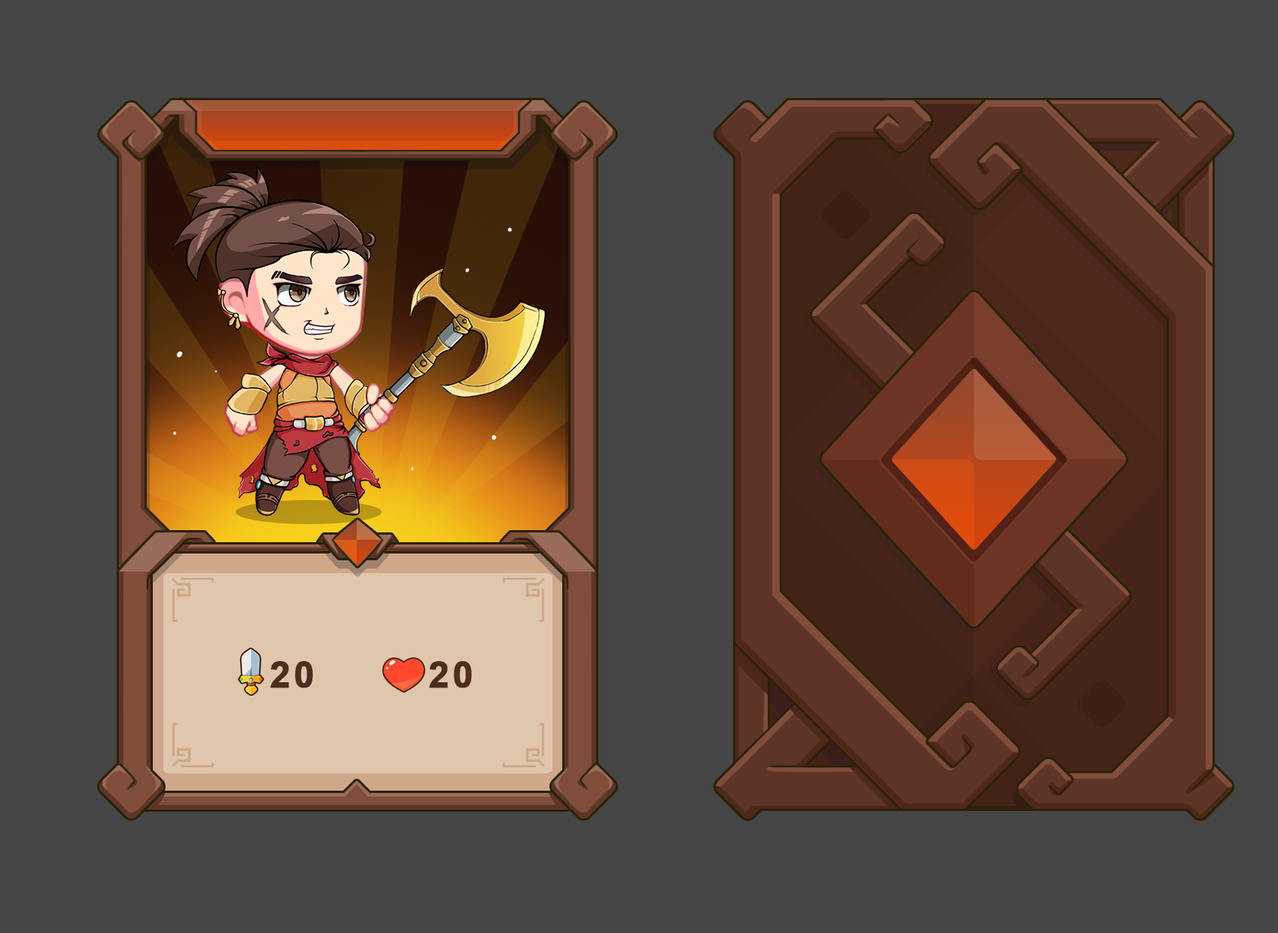
<style>
.page{position:relative;width:1278px;height:933px;background:#454545}
.page>*{position:absolute;margin:0}
.t1{font:36.1px "Arial-BoldMT";letter-spacing:0.08em;color:#502c1e;font-weight:bold}
</style>
<div class="page">
<p class="t1" style="left:270px;top:661px;width:43px;height:27px">20</p>
<p class="t1" style="left:429px;top:661px;width:43px;height:27px">20</p>
</div>
